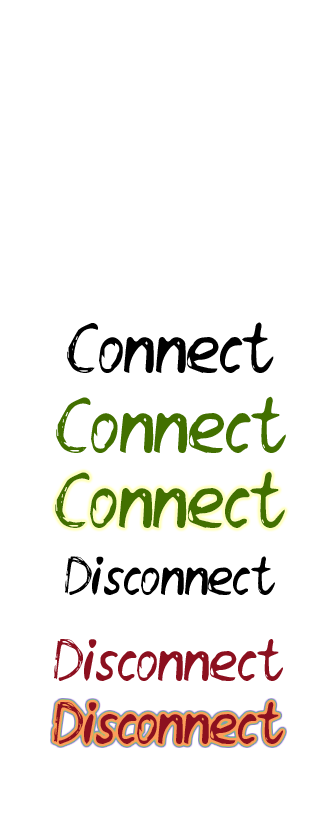
<style>
.page{position:relative;width:322px;height:835px;background:#ffffff}
.page>*{position:absolute;margin:0}
.t1{font:72px "DaneehandRegular";color:#000000}
.t2{font:80px "DaneehandRegular";color:#427000}
.t3{font:55px "DaneehandRegular";color:#000000}
.t4{font:60px "DaneehandRegular";color:#8c101f}
</style>
<div class="page">
<p class="t1" style="left:67px;top:322px;width:207px;height:51px">Connect</p>
<p class="t2" style="left:56px;top:396px;width:230px;height:57px">Connect</p>
<p class="t2" style="left:55px;top:471px;width:230px;height:57px">Connect</p>
<p class="t3" style="left:65px;top:556px;width:210px;height:39px">Disconnect</p>
<p class="t4" style="left:54px;top:639px;width:229px;height:42px">Disconnect</p>
<p class="t4" style="left:54px;top:702px;width:229px;height:42px">Disconnect</p>
</div>
